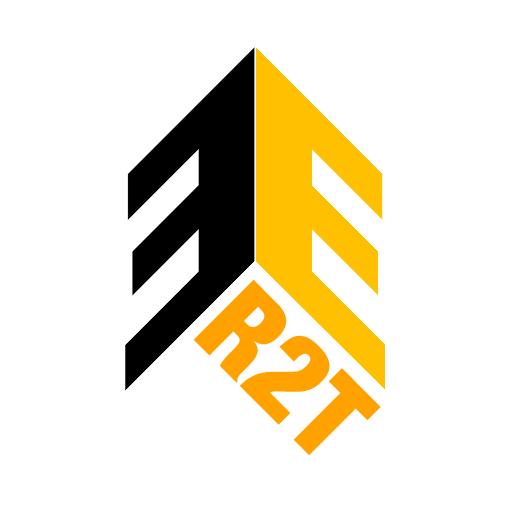
<style>
.page{position:relative;width:512px;height:512px;background:#ffffff}
.page>*{position:absolute;margin:0}
.t1{font:118.6px "HelveticaNeue-CondensedBlack";color:#ffa200}
</style>
<div class="page">
<p class="t1" style="left:193px;top:279px;width:188px;height:177px;rotate:45deg">R2T</p>
</div>
